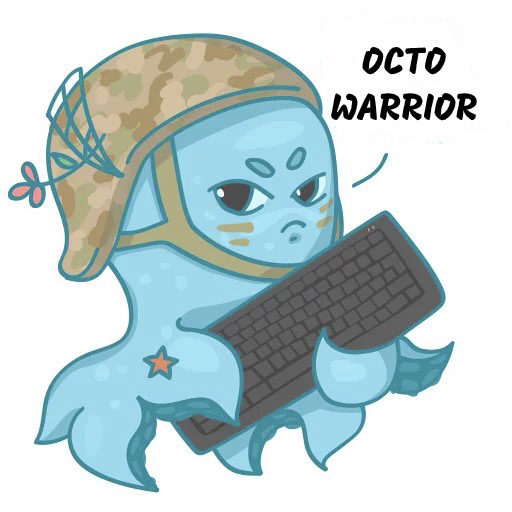
<style>
.page{position:relative;width:512px;height:512px;background:#ffffff}
.page>*{position:absolute;margin:0}
.t1{font:38px "Mogra-Regular";color:#000000}
</style>
<div class="page">
<p class="t1" style="left:331px;top:47px;width:146px;height:74px;text-align:center">OCTO<br>WARRIOR</p>
</div>
